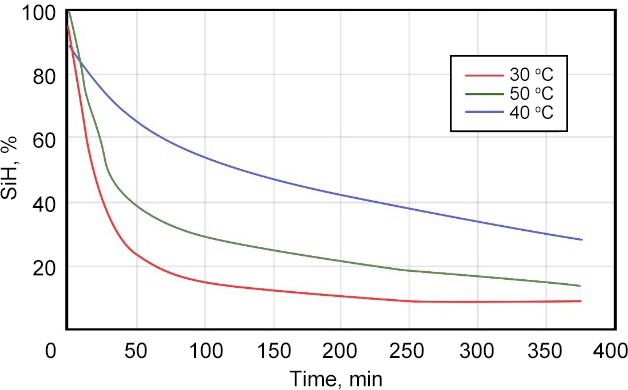
<style>
.page{position:relative;width:628px;height:390px;background:#ffffff}
.page>*{position:absolute;margin:0}
.t1{font:21.4px "ArialMT";color:#000000}
.t2{font:18.3px "ArialMT";color:#000000}
</style>
<div class="page">
<p class="t1" style="left:22px;top:4px;width:34px;height:272px;text-align:right">100<br>80<br>60<br>40<br>20</p>
<p class="t2" style="left:510px;top:67px;width:44px;height:14px">30 oC</p>
<p class="t2" style="left:510px;top:86px;width:44px;height:14px">50 oC</p>
<p class="t2" style="left:509px;top:105px;width:45px;height:14px">40 oC</p>
<p class="t1" style="left:0px;top:136px;width:20px;height:64px;rotate:-90deg">SiH, %</p>
<p class="t1" style="left:45px;top:342px;width:11px;height:17px">0</p>
<p class="t1" style="left:125px;top:342px;width:22px;height:17px">50</p>
<p class="t1" style="left:190px;top:342px;width:33px;height:17px">100</p>
<p class="t1" style="left:258px;top:342px;width:33px;height:17px">150</p>
<p class="t1" style="left:322px;top:342px;width:35px;height:17px">200</p>
<p class="t1" style="left:389px;top:342px;width:35px;height:17px">250</p>
<p class="t1" style="left:460px;top:342px;width:34px;height:17px">300</p>
<p class="t1" style="left:528px;top:342px;width:34px;height:17px">350</p>
<p class="t1" style="left:593px;top:342px;width:35px;height:17px">400</p>
<p class="t1" style="left:289px;top:370px;width:93px;height:20px">Time, min</p>
</div>
